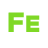
<style>
.page{position:relative;width:48px;height:48px;background:#ffffff}
.page>*{position:absolute;margin:0}
.t1{font:25px "PRIMETIME-Regular";color:#7fd826}
</style>
<div class="page">
<p class="t1" style="left:8px;top:12px;width:32px;height:20px">Fe</p>
</div>
